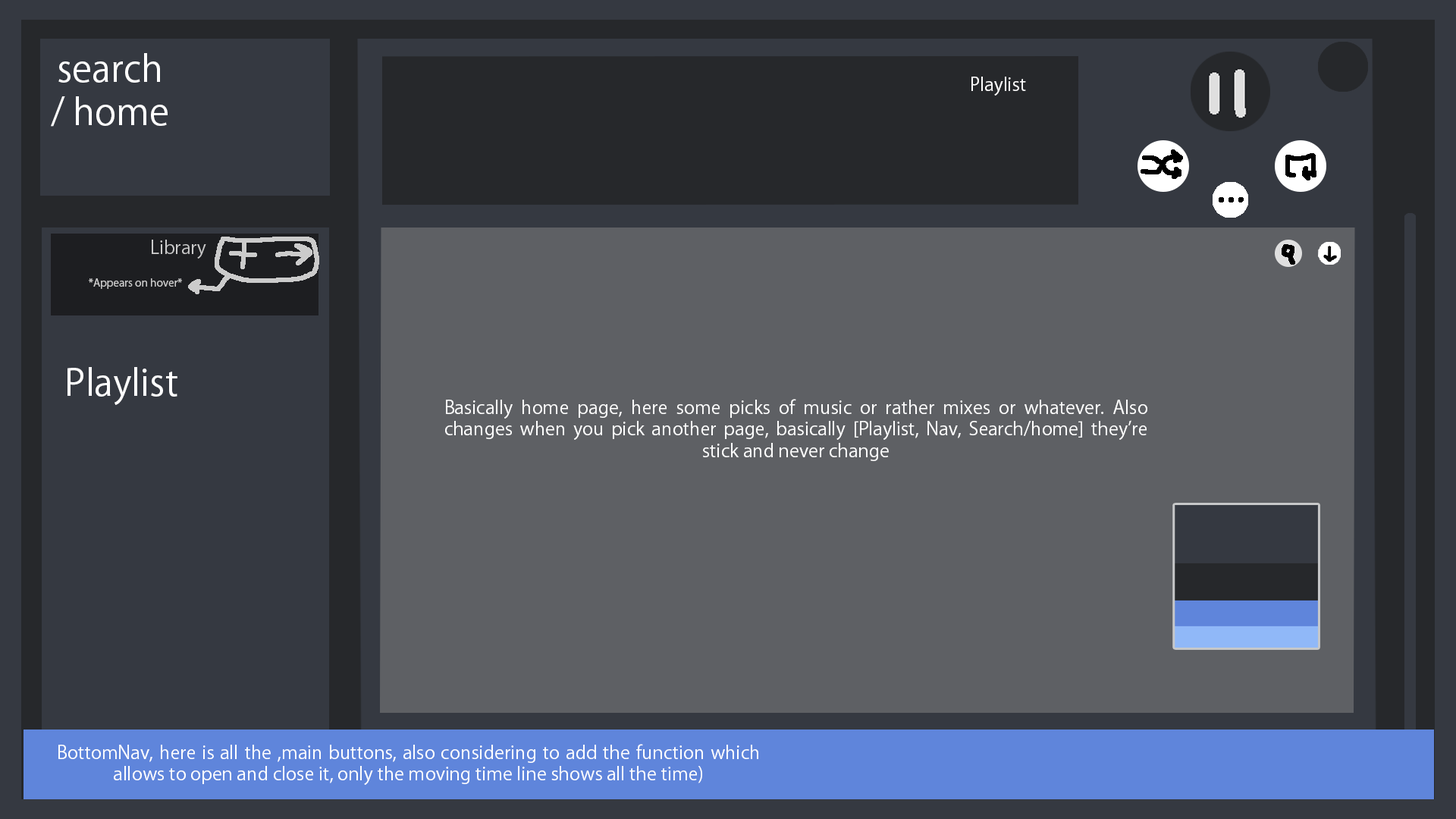
<style>
.page{position:relative;width:1456px;height:819px;background:#5e6064}
.page>*{position:absolute;margin:0}
.t1{font:36.4px "KozGoPr6N-Regular";color:#ffffff}
.t2{font:18.2px "KozGoPr6N-Regular";color:#ffffff}
.t3{font:10.6px "KozGoPr6N-Regular";color:#cbcbcb}
</style>
<div class="page">
<p class="t1" style="left:51px;top:53px;width:117px;height:74px;text-align:justify">search<br>/ home</p>
<p class="t2" style="left:971px;top:77px;width:55px;height:19px">Playlist</p>
<p class="t3" style="left:89px;top:278px;width:93px;height:11px">*Appears on hover*</p>
<p class="t1" style="left:67px;top:367px;width:110px;height:38px">Playlist</p>
<p class="t2" style="left:445px;top:399px;width:702px;height:62px;text-align:justify">Basically home page, here some picks of music or rather mixes or whatever. Also changes when you pick another page, basically [Playlist, Nav, Search/home] they’re stick and never change</p>
<p class="t2" style="left:58px;top:744px;width:700px;height:41px;text-align:justify">BottomNav, here is all the ,main buttons, also considering to add the function which allows to open and close it, only the moving time line shows all the time)</p>
</div>
